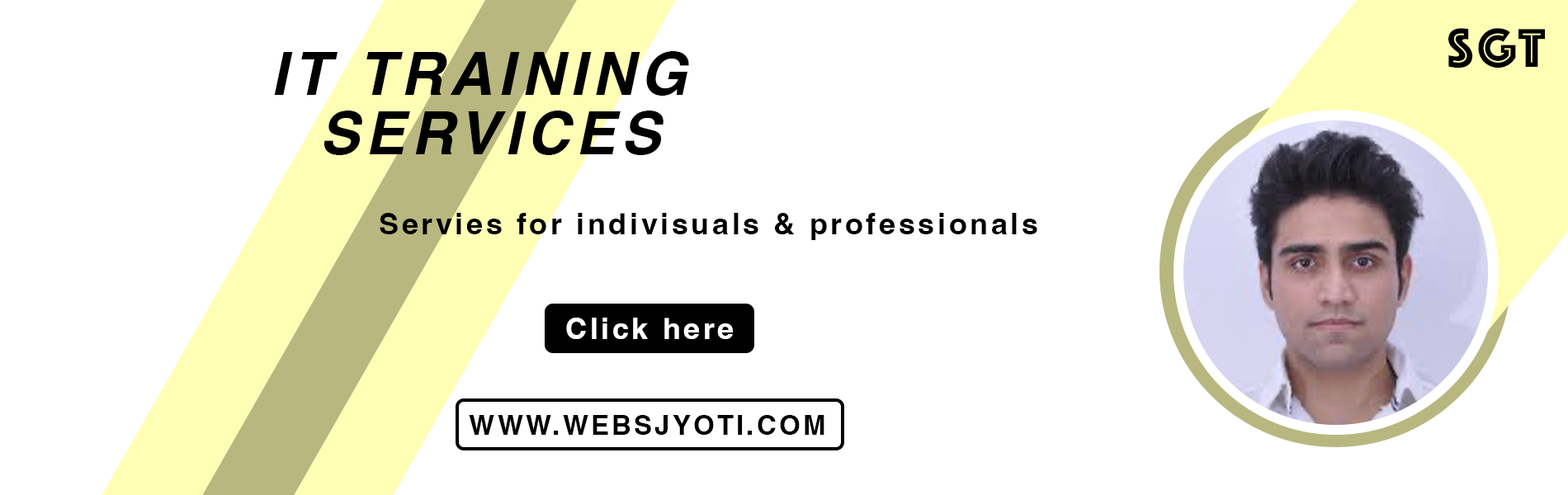
<style>
.page{position:relative;width:1568px;height:495px;background:#ffffff}
.page>*{position:absolute;margin:0}
.t1{font:56.5px "Phosphate-Inline";letter-spacing:0.1em;color:#000000}
.t2{font:59.4px/59.4px "Helvetica-BoldOblique";letter-spacing:0.1em;color:#000000}
.t3{font:29.7px "Helvetica-Bold";letter-spacing:0.1em;color:#000000}
.t4{font:29.7px "Helvetica-Bold";letter-spacing:0.1em;color:#ffffff}
.t5{font:27.1px "Helvetica-Bold";letter-spacing:0.1em;color:#000000}
</style>
<div class="page">
<p class="t1" style="left:1448px;top:28px;width:97px;height:40px">SGT</p>
<p class="t2" style="left:274px;top:51px;width:415px;height:104px;text-align:center">IT TRAINING<br> SERVICES</p>
<p class="t3" style="left:380px;top:213px;width:657px;height:27px">Servies for indivisuals &amp; professionals</p>
<p class="t4" style="left:566px;top:318px;width:167px;height:21px">Click here</p>
<p class="t5" style="left:469px;top:415px;width:355px;height:20px">WWW.WEBSJYOTI.COM</p>
</div>
